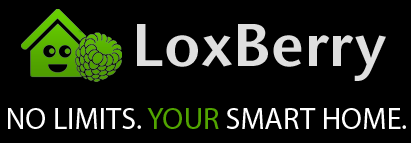
<style>
.page{position:relative;width:411px;height:143px;background:#000000}
.page>*{position:absolute;margin:0}
.t1{font:30.3px "MyriadPro-Regular";color:#ffffff}
.t2{font:30.3px "MyriadPro-Regular";color:#51a400}
</style>
<div class="page">
<p class="t1" style="left:8px;top:108px;width:398px;height:21px">NO LIMITS. <span class="t2">YOUR </span>SMART HOME.</p>
</div>
